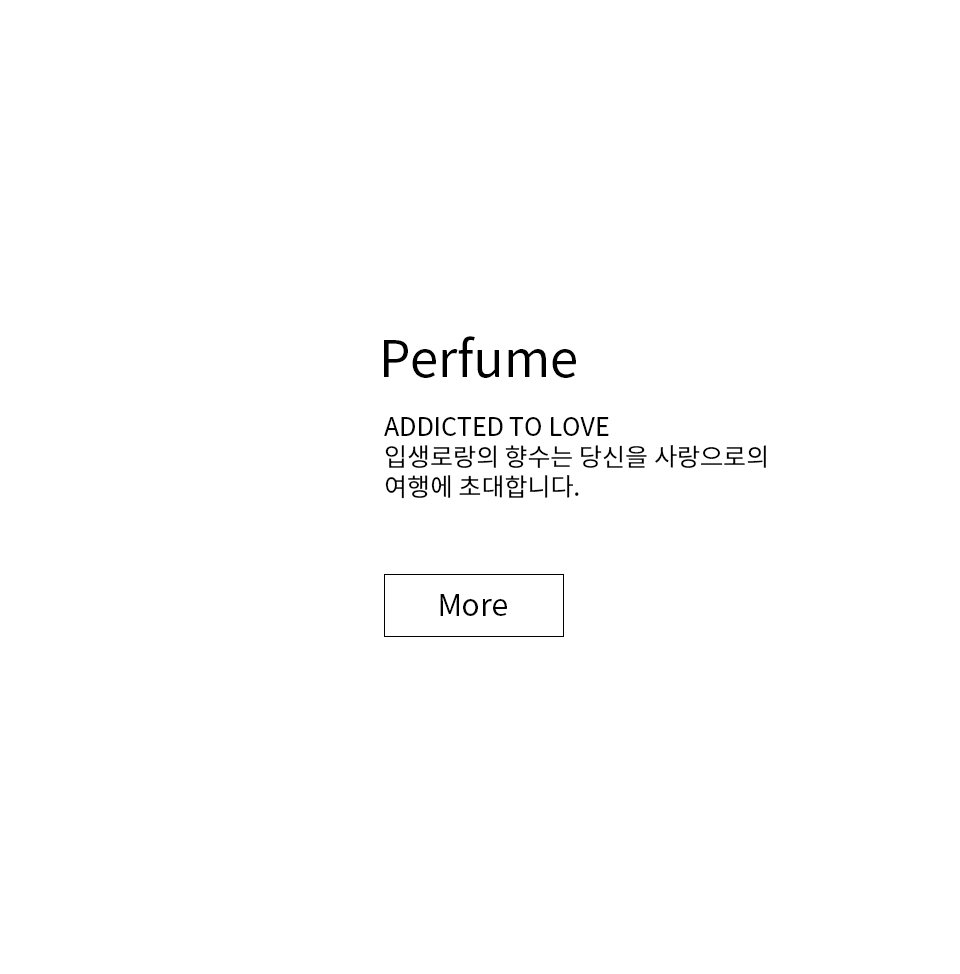
<style>
.page{position:relative;width:960px;height:974px;background:#ffffff}
.page>*{position:absolute;margin:0}
.t1{font:50px "NotoSansKR-Regular";color:#000000}
.t2{font:25px/30px "NotoSansKR-Regular";color:#000000}
.t3{font:30px "NotoSansKR-Regular";color:#000000}
</style>
<div class="page">
<p class="t1" style="left:384px;top:336px;width:192px;height:42px">Perfume</p>
<p class="t2" style="left:384px;top:417px;width:382px;height:82px">ADDICTED TO LOVE<br>입생로랑의 향수는 당신을 사랑으로의 <br>여행에 초대합니다.</p>
<p class="t3" style="left:440px;top:594px;width:67px;height:22px">More</p>
</div>
